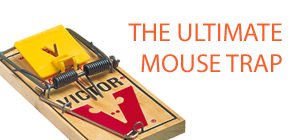
<style>
.page{position:relative;width:300px;height:140px;background:#ffffff}
.page>*{position:absolute;margin:0}
.t1{font:26px "MyriadPro-Regular";color:#f7602d}
</style>
<div class="page">
<p class="t1" style="left:128px;top:23px;width:154px;height:50px;text-align:right">THE ULTIMATE<br>MOUSE TRAP</p>
</div>
